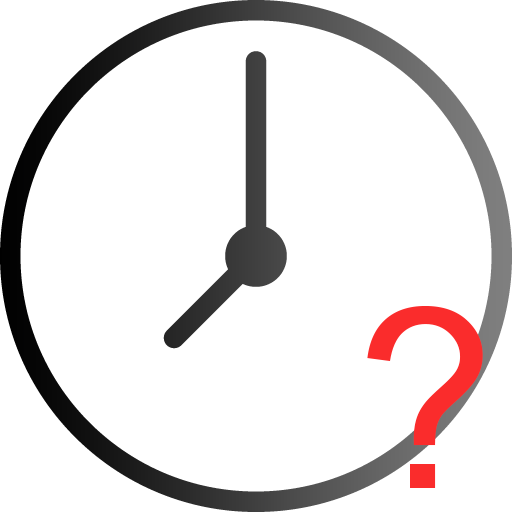
<style>
.page{position:relative;width:512px;height:512px;background:#ffffff}
.page>*{position:absolute;margin:0}
.t1{font:250px "ArialMT";letter-spacing:0.12em;color:#fa2c2c}
</style>
<div class="page">
<p class="t1" style="left:367px;top:306px;width:116px;height:182px">?</p>
</div>
